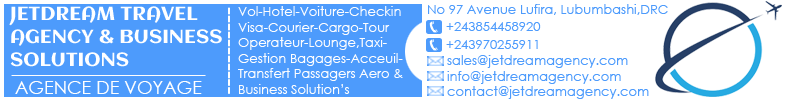
<style>
.page{position:relative;width:785px;height:100px;background:#ffffff}
.page>*{position:absolute;margin:0}
.t1{font:19px "Aclonica-Regular";color:#ffffff}
.t2{font:13px "CenturyGothic";color:#fdfdfe}
.t3{font:13px "CenturyGothic";color:#4d9bfc}
.t4{font:18px "CenturyGothic";color:#ffffff}
</style>
<div class="page">
<p class="t1" style="left:9px;top:6px;width:213px;height:61px;text-align:justify">JETDREAM TRAVEL <br>AGENCY &amp; BUSINESS<br>SOLUTIONS</p>
<p class="t2" style="left:238px;top:6px;width:165px;height:88px;text-align:justify">Vol-Hotel-Voiture-Checkin<br>Visa-Courier-Cargo-Tour <br>Operateur-Lounge,Taxi-<br>Gestion Bagages-Acceuil- <br>Transfert Passagers Aero &amp;<br>Business Solution’s</p>
<p class="t3" style="left:428px;top:4px;width:240px;height:11px">No 97 Avenue Lufira, Lubumbashi,DRC</p>
<p class="t3" style="left:446px;top:22px;width:95px;height:9px">+243854458920</p>
<p class="t3" style="left:446px;top:40px;width:92px;height:9px">+243970255911</p>
<p class="t3" style="left:447px;top:55px;width:181px;height:13px">sales@jetdreamagency.com</p>
<p class="t3" style="left:447px;top:71px;width:174px;height:13px">info@jetdreamagency.com</p>
<p class="t4" style="left:15px;top:81px;width:187px;height:13px">AGENCE DE VOYAGE</p>
<p class="t3" style="left:447px;top:86px;width:202px;height:13px">contact@jetdreamagency.com</p>
</div>
